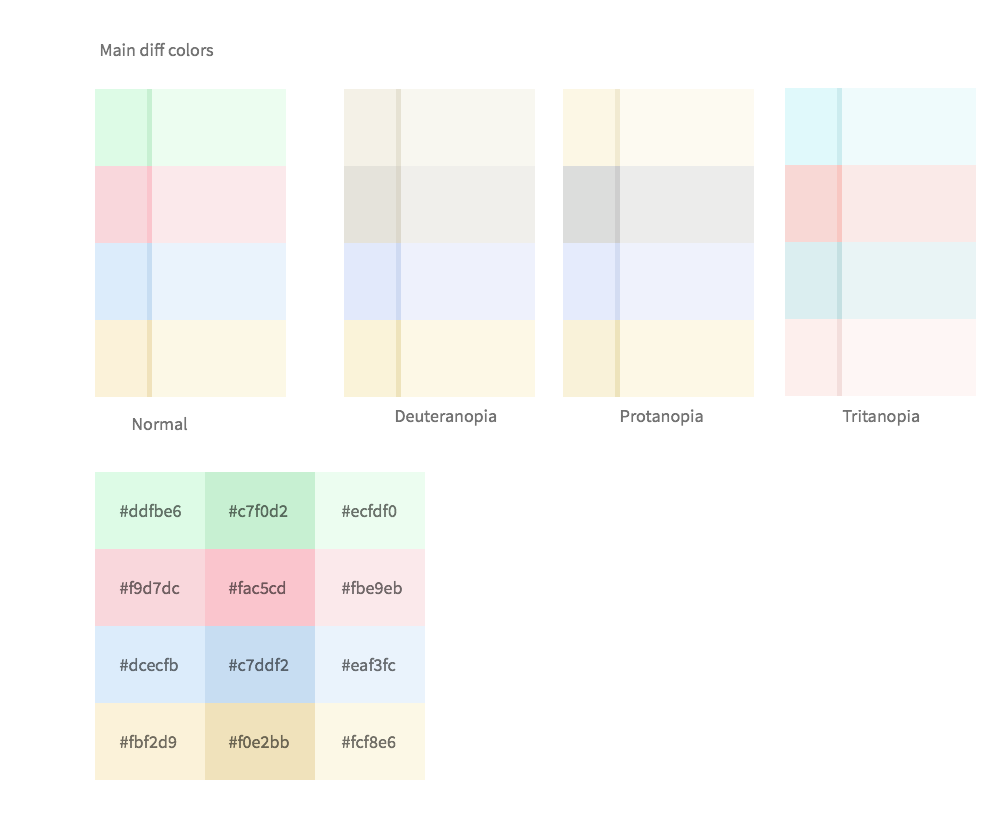
<style>
.page{position:relative;width:1000px;height:836px;background:#ffffff}
.page>*{position:absolute;margin:0}
.t1{font:18px "SourceSansPro-Regular";color:#737373}
.t2{font:18px "SourceSansPro-Regular";color:#627167}
.t3{font:18px "SourceSansPro-Regular";color:#586b5d}
.t4{font:18px "SourceSansPro-Regular";color:#6a726b}
.t5{font:18px "SourceSansPro-Regular";color:#706062}
.t6{font:18px "SourceSansPro-Regular";color:#70575b}
.t7{font:18px "SourceSansPro-Regular";color:#716869}
.t8{font:18px "SourceSansPro-Regular";color:#626a71}
.t9{font:18px "SourceSansPro-Regular";color:#58626c}
.t10{font:18px "SourceSansPro-Regular";color:#696d71}
.t11{font:18px "SourceSansPro-Regular";color:#716c60}
.t12{font:18px "SourceSansPro-Regular";color:#6b6552}
.t13{font:18px "SourceSansPro-Regular";color:#716f67}
</style>
<div class="page">
<p class="t1" style="left:100px;top:42px;width:114px;height:15px">Main diff colors</p>
<p class="t1" style="left:395px;top:409px;width:102px;height:17px">Deuteranopia</p>
<p class="t1" style="left:620px;top:409px;width:83px;height:17px">Protanopia</p>
<p class="t1" style="left:842px;top:409px;width:78px;height:17px">Tritanopia</p>
<p class="t1" style="left:132px;top:416px;width:56px;height:15px">Normal</p>
<p class="t2" style="left:119px;top:503px;width:62px;height:15px">#ddfbe6</p>
<p class="t3" style="left:228px;top:503px;width:60px;height:15px">#c7f0d2</p>
<p class="t4" style="left:341px;top:503px;width:56px;height:15px">#ecfdf0</p>
<p class="t5" style="left:119px;top:580px;width:61px;height:15px">#f9d7dc</p>
<p class="t6" style="left:228px;top:580px;width:58px;height:15px">#fac5cd</p>
<p class="t7" style="left:341px;top:580px;width:61px;height:15px">#fbe9eb</p>
<p class="t8" style="left:119px;top:657px;width:59px;height:15px">#dcecfb</p>
<p class="t9" style="left:228px;top:657px;width:61px;height:15px">#c7ddf2</p>
<p class="t10" style="left:341px;top:657px;width:55px;height:15px">#eaf3fc</p>
<p class="t11" style="left:119px;top:734px;width:58px;height:15px">#fbf2d9</p>
<p class="t12" style="left:228px;top:734px;width:61px;height:15px">#f0e2bb</p>
<p class="t13" style="left:341px;top:734px;width:55px;height:15px">#fcf8e6</p>
</div>
